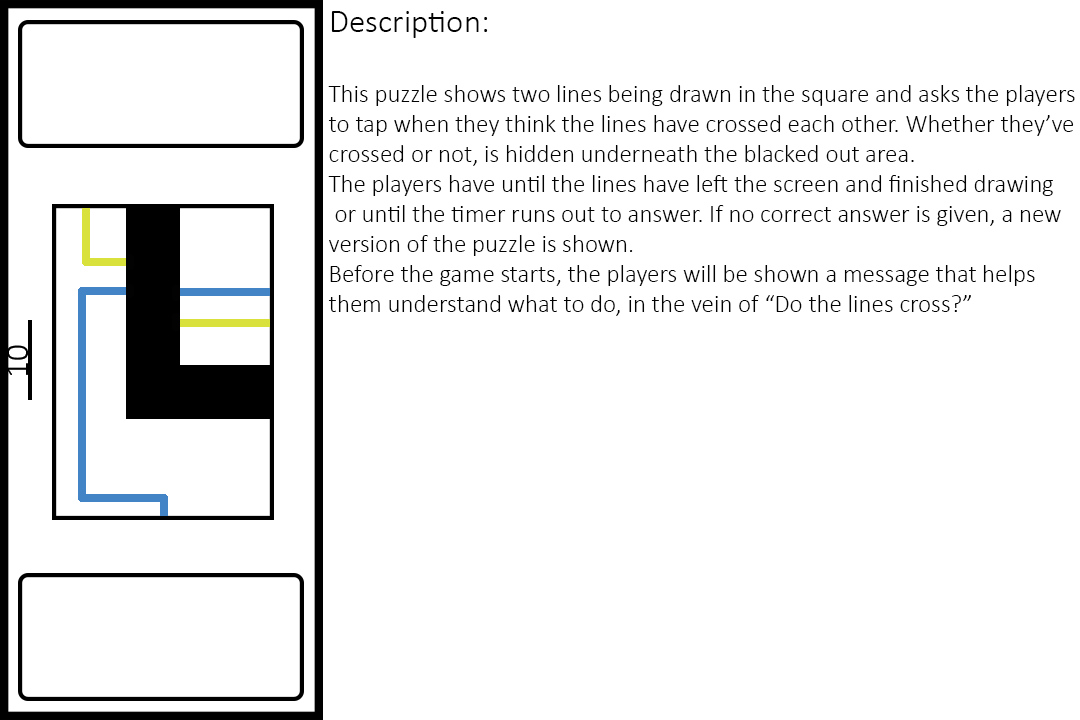
<style>
.page{position:relative;width:1080px;height:720px;background:#ffffff}
.page>*{position:absolute;margin:0}
.t1{font:25px "Calibri-Light";color:#020202}
.t2{font:33.3px "Calibri-Light";color:#020202}
</style>
<div class="page">
<p class="t1" style="left:328px;top:11px;width:747px;height:305px"><span class="t2">Description:<br><br></span>This puzzle shows two lines being drawn in the square and asks the players<br>to tap when they think the lines have crossed each other. Whether they’ve<br>crossed or not, is hidden underneath the blacked out area.<br>The players have until the lines have left the screen and finished drawing<br> or until the timer runs out to answer. If no correct answer is given, a new <br>version of the puzzle is shown.<br>Before the game starts, the players will be shown a message that helps<br>them understand what to do, in the vein of “Do the lines cross?”</p>
</div>
